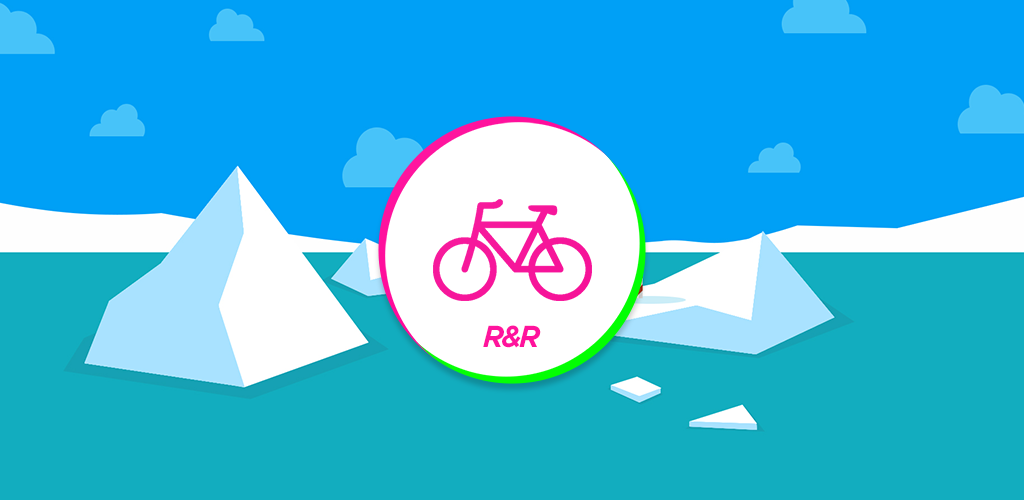
<style>
.page{position:relative;width:1024px;height:500px;background:#00a0f6}
.page>*{position:absolute;margin:0}
.t1{font:30.4px "Gotham-BoldItalic";letter-spacing:-0.082em;color:#ff0d9b;scale:0.95 1}
</style>
<div class="page">
<p class="t1" style="left:483px;top:325px;width:58px;height:23px">R&amp;R</p>
</div>
